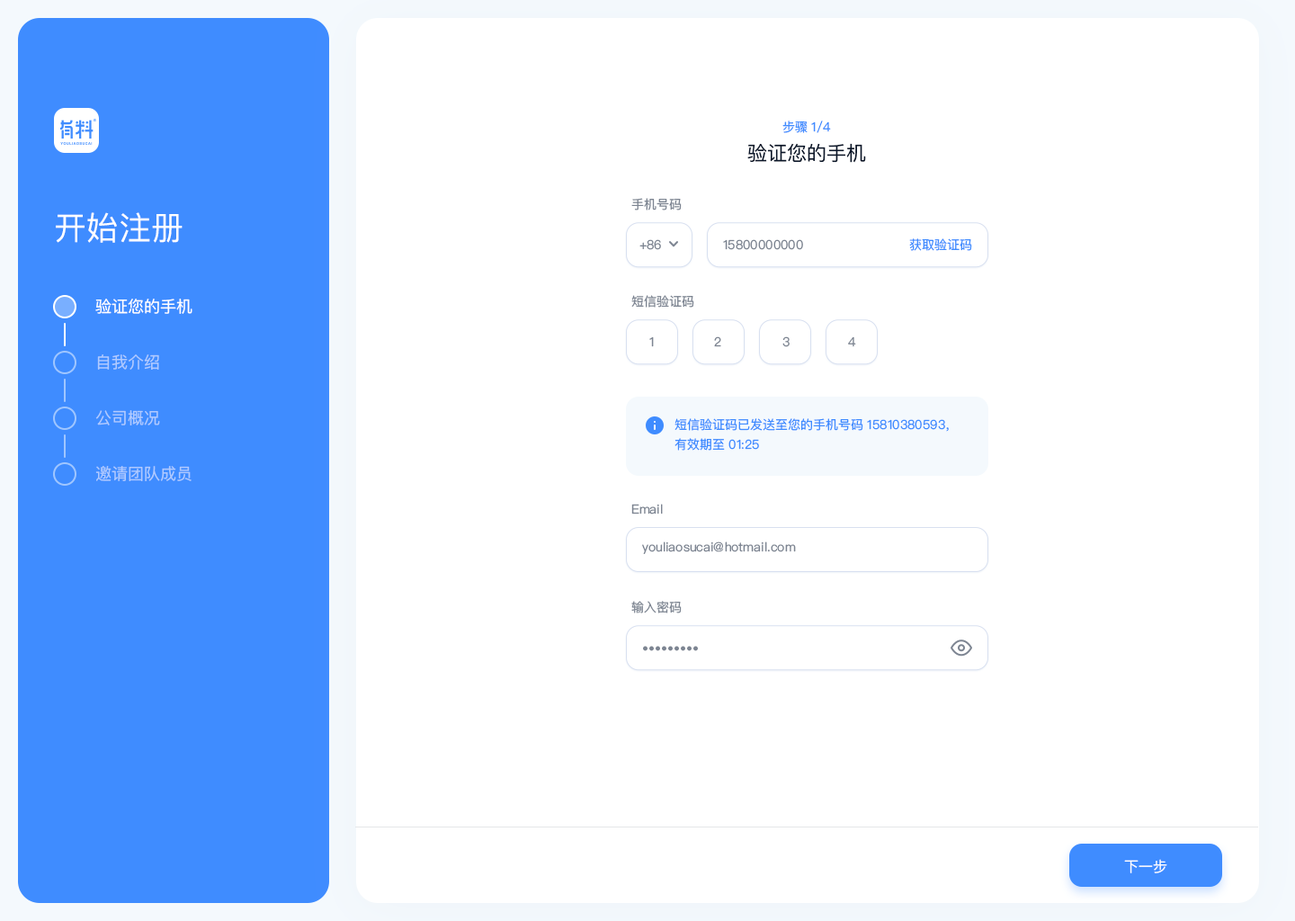
<style>
.page{position:relative;width:1295px;height:921px;background:#ffffff}
.page>*{position:absolute;margin:0}
.t1{font:12.6px "PingFangSC-Regular";color:#3f8cff;text-transform:uppercase}
.t2{font:19.8px "PingFangSC-Regular";color:#0a1629}
.t3{font:12.6px "PingFangSC-Regular";color:#7d8592}
.t4{font:32.4px "PingFangSC-Regular";color:#ffffff}
.t5{font:12.6px "PingFangSC-Regular";color:#3f8cff}
.t6{font:16.2px "PingFangSC-Regular";color:#ffffff}
.t7{font:16.2px "PingFangSC-Regular";color:#b0caff}
.t8{font:12.6px/19.8px "PingFangSC-Regular";color:#3f8cff}
.t9{font:14.4px "PingFangSC-Regular";color:#ffffff}
</style>
<div class="page">
<p class="t1" style="left:782px;top:121px;width:49px;height:12px">步骤 1/4</p>
<p class="t2" style="left:747px;top:143px;width:119px;height:20px">验证您的手机</p>
<p class="t3" style="left:631px;top:198px;width:51px;height:12px">手机号码</p>
<p class="t4" style="left:56px;top:212px;width:127px;height:31px">开始注册</p>
<p class="t3" style="left:639px;top:239px;width:22px;height:11px">+86</p>
<p class="t3" style="left:723px;top:239px;width:80px;height:11px">15800000000</p>
<p class="t5" style="left:909px;top:238px;width:63px;height:13px">获取验证码</p>
<p class="t6" style="left:95px;top:299px;width:97px;height:15px">验证您的手机</p>
<p class="t3" style="left:631px;top:295px;width:63px;height:13px">短信验证码</p>
<p class="t3" style="left:649px;top:336px;width:5px;height:11px">1</p>
<p class="t3" style="left:714px;top:336px;width:7px;height:11px">2</p>
<p class="t3" style="left:782px;top:336px;width:8px;height:11px">3</p>
<p class="t3" style="left:848px;top:336px;width:8px;height:11px">4</p>
<p class="t7" style="left:97px;top:354px;width:62px;height:16px">自我介绍</p>
<p class="t7" style="left:95px;top:410px;width:65px;height:15px">公司概况</p>
<p class="t8" style="left:674px;top:418px;width:275px;height:33px">短信验证码已发送至您的手机号码 15810380593，有效期至 01:25</p>
<p class="t7" style="left:95px;top:466px;width:97px;height:15px">邀请团队成员</p>
<p class="t3" style="left:631px;top:504px;width:32px;height:10px">Email</p>
<p class="t3" style="left:642px;top:541px;width:154px;height:13px">youliaosucai@hotmail.com</p>
<p class="t3" style="left:631px;top:601px;width:51px;height:12px">输入密码</p>
<p class="t3" style="left:643px;top:646px;width:55px;height:5px">•••••••••</p>
<p class="t9" style="left:1124px;top:859px;width:43px;height:14px">下一步</p>
</div>
